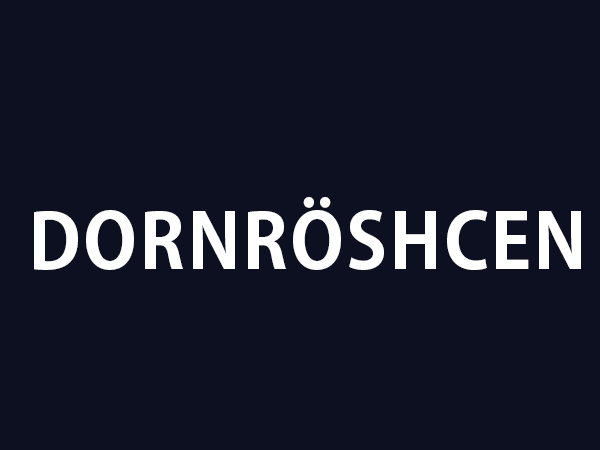
<style>
.page{position:relative;width:600px;height:450px;background:#0c1020}
.page>*{position:absolute;margin:0}
.t1{font:75px "KozGoPr6N-Bold";letter-spacing:0.025em;color:#ffffff}
</style>
<div class="page">
<p class="t1" style="left:34px;top:197px;width:547px;height:73px">DORNRÖSHCEN</p>
</div>
